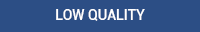
<style>
.page{position:relative;width:200px;height:32px;background:#2c4e85}
.page>*{position:absolute;margin:0}
.t1{font:14px "Roboto-Medium";color:#ffffff}
</style>
<div class="page">
<p class="t1" style="left:56px;top:9px;width:89px;height:12px">LOW QUALITY</p>
</div>
